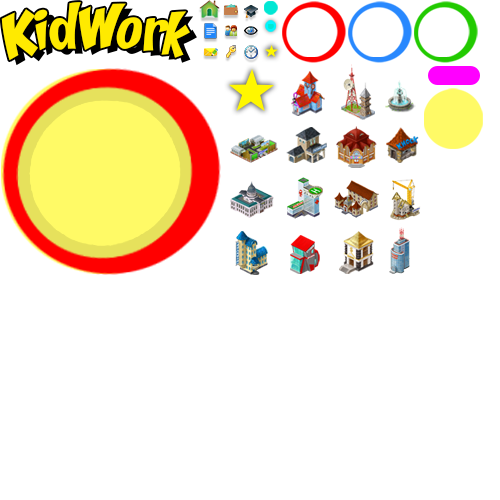
<style>
.page{position:relative;width:500px;height:500px;background:#ffffff}
.page>*{position:absolute;margin:0}
.t1{font:52.2px "v_CCZoinks";color:#ffea00}
</style>
<div class="page">
<p class="t1" style="left:1px;top:2px;width:189px;height:59px">KidWork</p>
</div>
